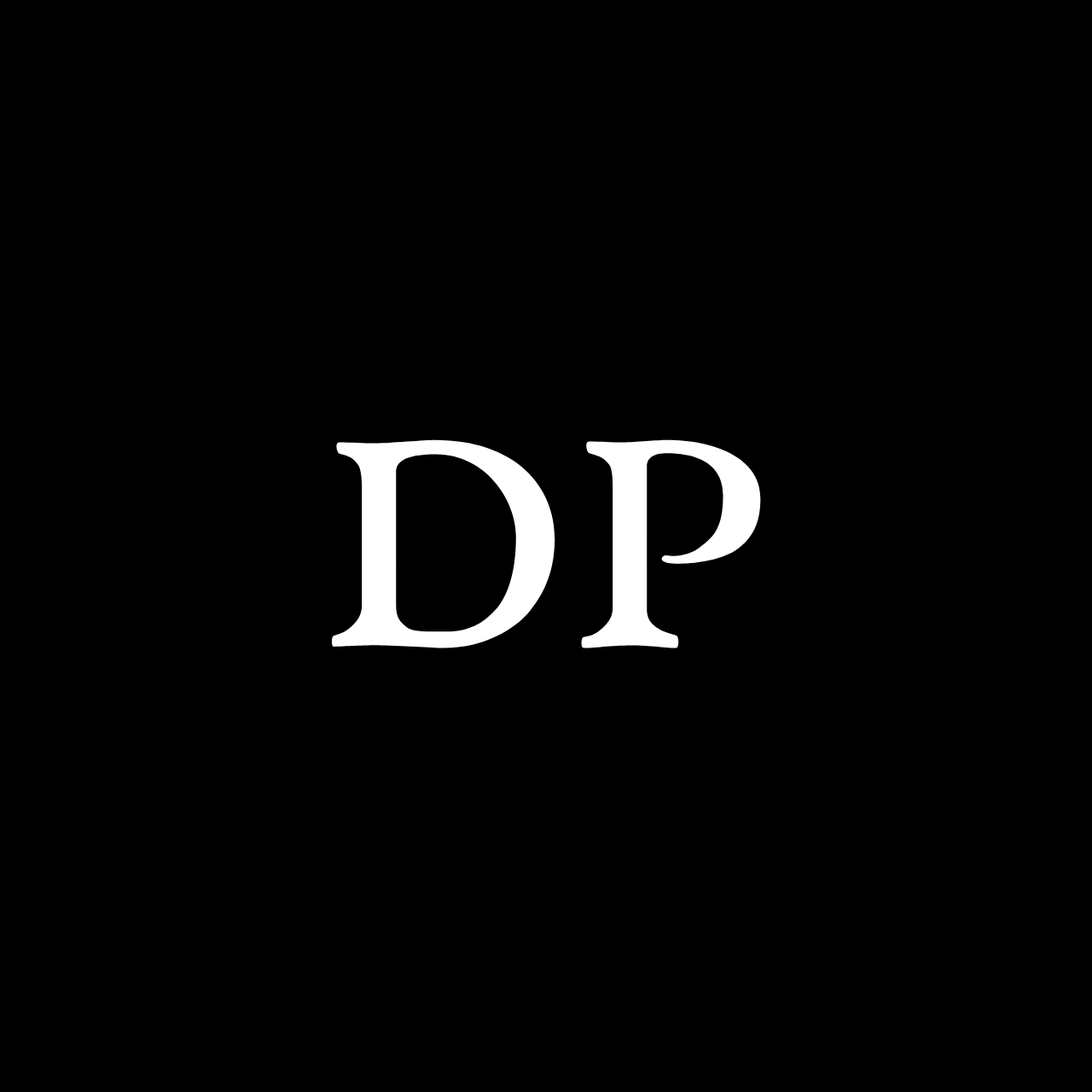
<style>
.page{position:relative;width:1092px;height:1092px;background:#000000}
.page>*{position:absolute;margin:0}
.t1{font:456.1px "EBGaramond12-AllSC";color:#ffffff}
</style>
<div class="page">
<p class="t1" style="left:331px;top:439px;width:430px;height:209px">DP</p>
</div>
